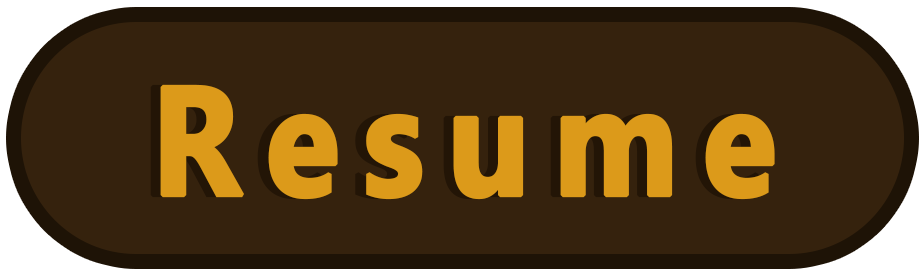
<style>
.page{position:relative;width:924px;height:277px;background:#35220d}
.page>*{position:absolute;margin:0}
.t1{font:154.5px "Gadugi-Bold";letter-spacing:0.156em;color:#dc9a1a;font-weight:bold;scale:0.88 1}
</style>
<div class="page">
<p class="t1" style="left:150px;top:84px;width:615px;height:116px">Resume</p>
<p class="t1" style="left:160px;top:84px;width:615px;height:116px">Resume</p>
</div>
